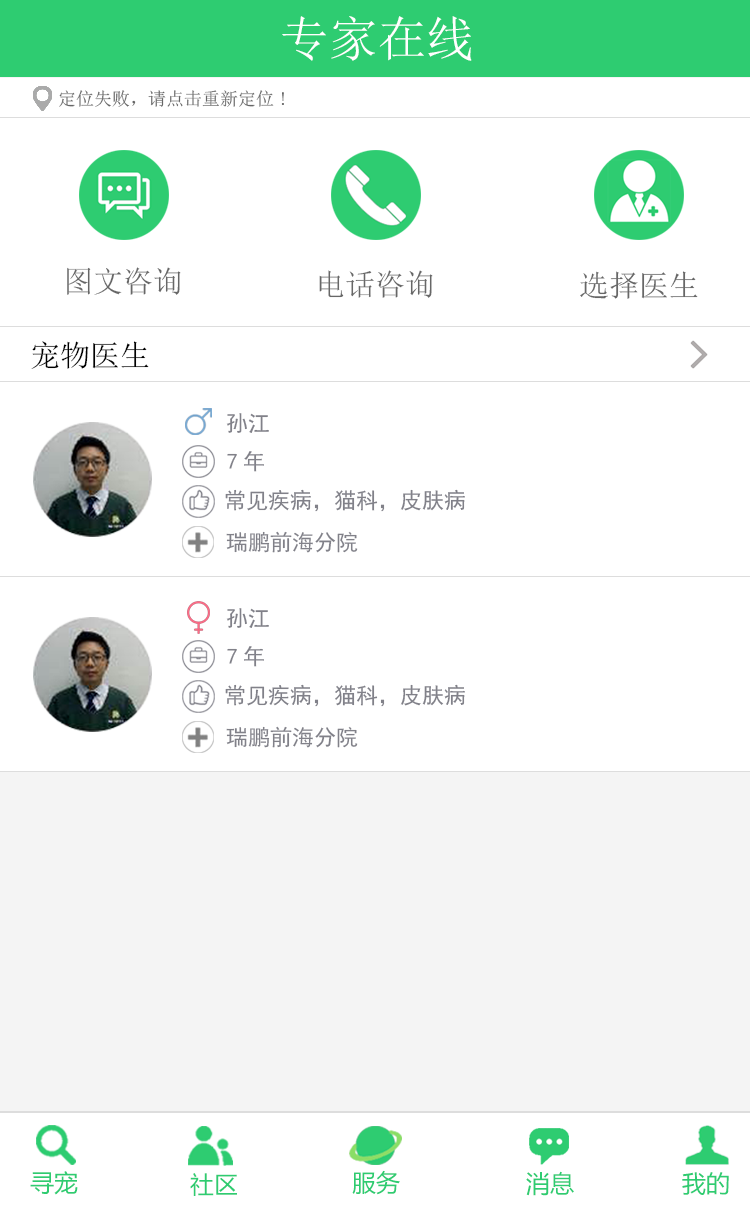
<style>
.page{position:relative;width:750px;height:1206px;background:#ffffff}
.page>*{position:absolute;margin:0}
.t1{font:48.7px "SimSun";color:#ffffff}
.t2{font:18px "SimSun";color:#666666}
.t3{font:30px "SimSun";color:#676767}
.t4{font:30px "SimSun";color:#000000}
.t5{font:22px "SimHei";color:#818189}
.t6{font:24px "MicrosoftYaHei";color:#2ecc71}
.t7{font:24px "MicrosoftYaHei"}
</style>
<div class="page">
<p class="t1" style="left:282px;top:16px;width:190px;height:45px">专家在线</p>
<p class="t2" style="left:59px;top:90px;width:225px;height:17px">定位失败，请点击重新定位!</p>
<p class="t3" style="left:67px;top:267px;width:114px;height:28px">图文咨询</p>
<p class="t3" style="left:319px;top:270px;width:114px;height:28px">电话咨询</p>
<p class="t3" style="left:580px;top:271px;width:118px;height:28px">选择医生</p>
<p class="t4" style="left:31px;top:341px;width:118px;height:28px">宠物医生</p>
<p class="t5" style="left:226px;top:413px;width:43px;height:20px">孙江</p>
<p class="t5" style="left:227px;top:451px;width:37px;height:21px">7年</p>
<p class="t5" style="left:225px;top:489px;width:240px;height:23px">常见疾病，猫科，皮肤病</p>
<p class="t5" style="left:226px;top:531px;width:132px;height:22px">瑞鹏前海分院</p>
<p class="t5" style="left:226px;top:608px;width:43px;height:20px">孙江</p>
<p class="t5" style="left:227px;top:646px;width:37px;height:21px">7年</p>
<p class="t5" style="left:225px;top:684px;width:240px;height:23px">常见疾病，猫科，皮肤病</p>
<p class="t5" style="left:226px;top:726px;width:132px;height:22px">瑞鹏前海分院</p>
<p class="t6" style="left:30px;top:1171px;width:48px;height:24px">寻宠</p>
<p class="t6" style="left:190px;top:1173px;width:47px;height:23px">社区</p>
<p class="t7" style="left:352px;top:1171px;width:48px;height:25px">服务</p>
<p class="t6" style="left:352px;top:1170px;width:48px;height:25px">服务</p>
<p class="t7" style="left:525px;top:1171px;width:48px;height:25px">消息</p>
<p class="t6" style="left:526px;top:1171px;width:48px;height:25px">消息</p>
<p class="t6" style="left:682px;top:1172px;width:47px;height:23px">我的</p>
<p class="t6" style="left:682px;top:1172px;width:47px;height:23px">我的</p>
</div>
